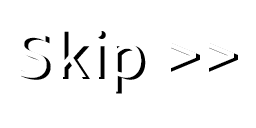
<style>
.page{position:relative;width:256px;height:128px;background:#ffffff}
.page>*{position:absolute;margin:0}
.t1{font:62.5px "Amiko-Regular"}
</style>
<div class="page">
<p class="t1" style="left:21px;top:31px;width:217px;height:63px">Skip &gt;&gt;</p>
</div>
